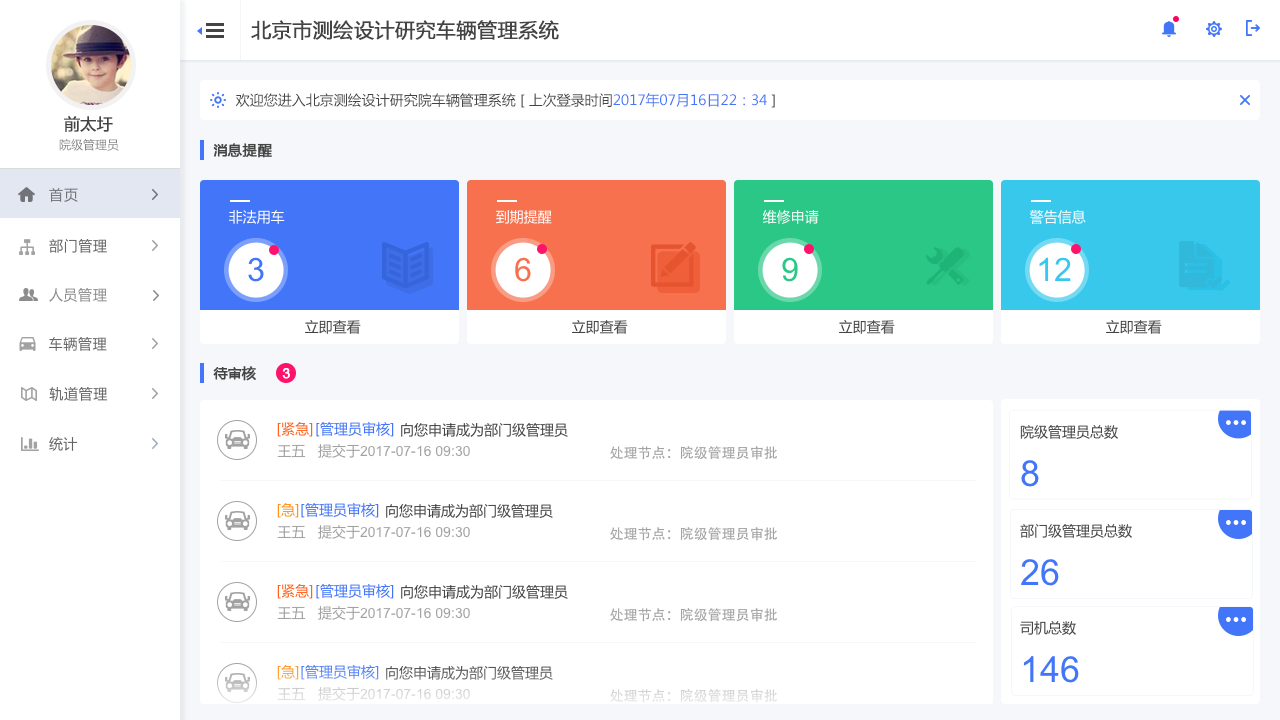
<style>
.page{position:relative;width:1280px;height:720px;background:#ffffff}
.page>*{position:absolute;margin:0}
.t1{font:20px "MicrosoftYaHei";color:#444444;font-weight:bold}
.t2{font:14px "MicrosoftYaHei";color:#444444}
.t3{font:14px "MicrosoftYaHei";color:#4275f8}
.t4{font:16px "MicrosoftYaHei";color:#444444;font-weight:bold}
.t5{font:12px "MicrosoftYaHei";color:#858585}
.t6{font:14px "MicrosoftYaHei";color:#444444;font-weight:bold}
.t7{font:14px "MicrosoftYaHei";letter-spacing:0.05em;color:#717378}
.t8{font:14px "MicrosoftYaHei";color:#ffffff}
.t9{font:14px "MicrosoftYaHei";letter-spacing:0.05em;color:#646464}
.t10{font:32.4px "ArialMT";color:#4275f8}
.t11{font:32.4px "ArialMT";color:#f7714f}
.t12{font:32.4px "ArialMT";color:#2bc787}
.t13{font:32.4px "ArialMT";color:#38c8ec}
.t14{font:14px "MicrosoftYaHei";letter-spacing:0.05em;color:#8c8c8c}
.t15{font:14px "ArialMT";color:#ffffff;font-weight:bold}
.t16{font:14px "MicrosoftYaHei";color:#ff5f18}
.t17{font:14px "ArialMT";color:#a2a2a2}
.t18{font:14px "MicrosoftYaHei";color:#a2a2a2}
.t19{font:14px "AdobeHeitiStd-Regular";color:#a2a2a2}
.t20{font:36px "ArialMT";color:#4275f8}
.t21{font:14px "MicrosoftYaHei";color:#ff9018}
.t22{font:14px "MicrosoftYaHei";color:#ff9d34}
.t23{font:14px "MicrosoftYaHei";color:#5684f9}
.t24{font:14px "MicrosoftYaHei";color:#565656}
.t25{font:14px "ArialMT";color:#d6d6d6}
.t26{font:14px "MicrosoftYaHei";color:#d6d6d6}
.t27{font:14px "AdobeHeitiStd-Regular";color:#d9d9d9}
</style>
<div class="page">
<p class="t1" style="left:251px;top:20px;width:308px;height:20px">北京市测绘设计研究车辆管理系统</p>
<p class="t2" style="left:235px;top:93px;width:540px;height:15px">欢迎您进入北京测绘设计研究院车辆管理系统 [ 上次登录时间<span class="t3">2017年07月16日22：34</span> ]</p>
<p class="t4" style="left:64px;top:116px;width:49px;height:16px">前太圩</p>
<p class="t5" style="left:59px;top:139px;width:60px;height:12px">院级管理员</p>
<p class="t6" style="left:213px;top:143px;width:59px;height:15px">消息提醒</p>
<p class="t7" style="left:49px;top:188px;width:29px;height:14px">首页</p>
<p class="t8" style="left:229px;top:210px;width:56px;height:14px">非法用车</p>
<p class="t8" style="left:496px;top:210px;width:56px;height:14px">到期提醒</p>
<p class="t8" style="left:762px;top:210px;width:57px;height:14px">维修申请</p>
<p class="t8" style="left:1030px;top:210px;width:56px;height:14px">警告信息</p>
<p class="t9" style="left:49px;top:239px;width:58px;height:14px">部门管理</p>
<p class="t10" style="left:248px;top:257px;width:16px;height:25px">3</p>
<p class="t11" style="left:515px;top:257px;width:16px;height:25px">6</p>
<p class="t12" style="left:782px;top:257px;width:16px;height:25px">9</p>
<p class="t13" style="left:1039px;top:257px;width:32px;height:24px">12</p>
<p class="t14" style="left:49px;top:288px;width:58px;height:14px">人员管理</p>
<p class="t2" style="left:305px;top:320px;width:56px;height:14px">立即查看</p>
<p class="t2" style="left:572px;top:320px;width:56px;height:14px">立即查看</p>
<p class="t2" style="left:839px;top:320px;width:56px;height:14px">立即查看</p>
<p class="t2" style="left:1106px;top:320px;width:56px;height:14px">立即查看</p>
<p class="t9" style="left:49px;top:337px;width:58px;height:14px">车辆管理</p>
<p class="t6" style="left:213px;top:366px;width:43px;height:15px">待审核</p>
<p class="t15" style="left:282px;top:368px;width:8px;height:11px">3</p>
<p class="t9" style="left:49px;top:387px;width:59px;height:14px">轨道管理</p>
<p class="t16" style="left:277px;top:422px;width:36px;height:15px">[紧急]</p>
<p class="t3" style="left:316px;top:422px;width:78px;height:15px">[管理员审核]</p>
<p class="t2" style="left:401px;top:423px;width:167px;height:14px">向您申请成为部门级管理员</p>
<p class="t2" style="left:1020px;top:425px;width:98px;height:14px">院级管理员总数</p>
<p class="t9" style="left:49px;top:437px;width:29px;height:14px">统计</p>
<p class="t17" style="left:277px;top:444px;width:193px;height:14px"><span class="t18">王五   提交于</span>2017-07-16 09:30</p>
<p class="t19" style="left:610px;top:446px;width:167px;height:14px">处理节点：院级管理员审批</p>
<p class="t20" style="left:1021px;top:460px;width:18px;height:27px">8</p>
<p class="t21" style="left:277px;top:503px;width:22px;height:15px">[急]</p>
<p class="t3" style="left:301px;top:503px;width:78px;height:15px">[管理员审核]</p>
<p class="t2" style="left:386px;top:504px;width:167px;height:14px">向您申请成为部门级管理员</p>
<p class="t17" style="left:277px;top:525px;width:193px;height:14px"><span class="t18">王五   提交于</span>2017-07-16 09:30</p>
<p class="t19" style="left:610px;top:527px;width:167px;height:14px">处理节点：院级管理员审批</p>
<p class="t2" style="left:1020px;top:524px;width:112px;height:14px">部门级管理员总数</p>
<p class="t20" style="left:1021px;top:559px;width:38px;height:27px">26</p>
<p class="t16" style="left:277px;top:584px;width:36px;height:15px">[紧急]</p>
<p class="t3" style="left:316px;top:584px;width:78px;height:15px">[管理员审核]</p>
<p class="t2" style="left:401px;top:585px;width:167px;height:14px">向您申请成为部门级管理员</p>
<p class="t17" style="left:277px;top:606px;width:193px;height:14px"><span class="t18">王五   提交于</span>2017-07-16 09:30</p>
<p class="t19" style="left:610px;top:608px;width:167px;height:14px">处理节点：院级管理员审批</p>
<p class="t2" style="left:1020px;top:621px;width:56px;height:14px">司机总数</p>
<p class="t22" style="left:277px;top:665px;width:22px;height:15px">[急]</p>
<p class="t23" style="left:301px;top:665px;width:78px;height:15px">[管理员审核]</p>
<p class="t20" style="left:1023px;top:656px;width:56px;height:27px">146</p>
<p class="t24" style="left:386px;top:666px;width:167px;height:14px">向您申请成为部门级管理员</p>
<p class="t25" style="left:277px;top:687px;width:193px;height:14px"><span class="t26">王五   提交于</span>2017-07-16 09:30</p>
<p class="t27" style="left:610px;top:689px;width:167px;height:14px">处理节点：院级管理员审批</p>
</div>
